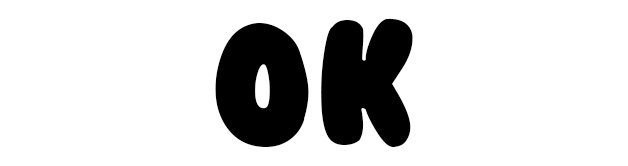
<style>
.page{position:relative;width:628px;height:166px;background:#ffffff}
.page>*{position:absolute;margin:0}
.t1{font:160.1px "BubbleGum";letter-spacing:0.02em;color:#000000}
</style>
<div class="page">
<p class="t1" style="left:215px;top:18px;width:198px;height:130px">ok</p>
</div>
